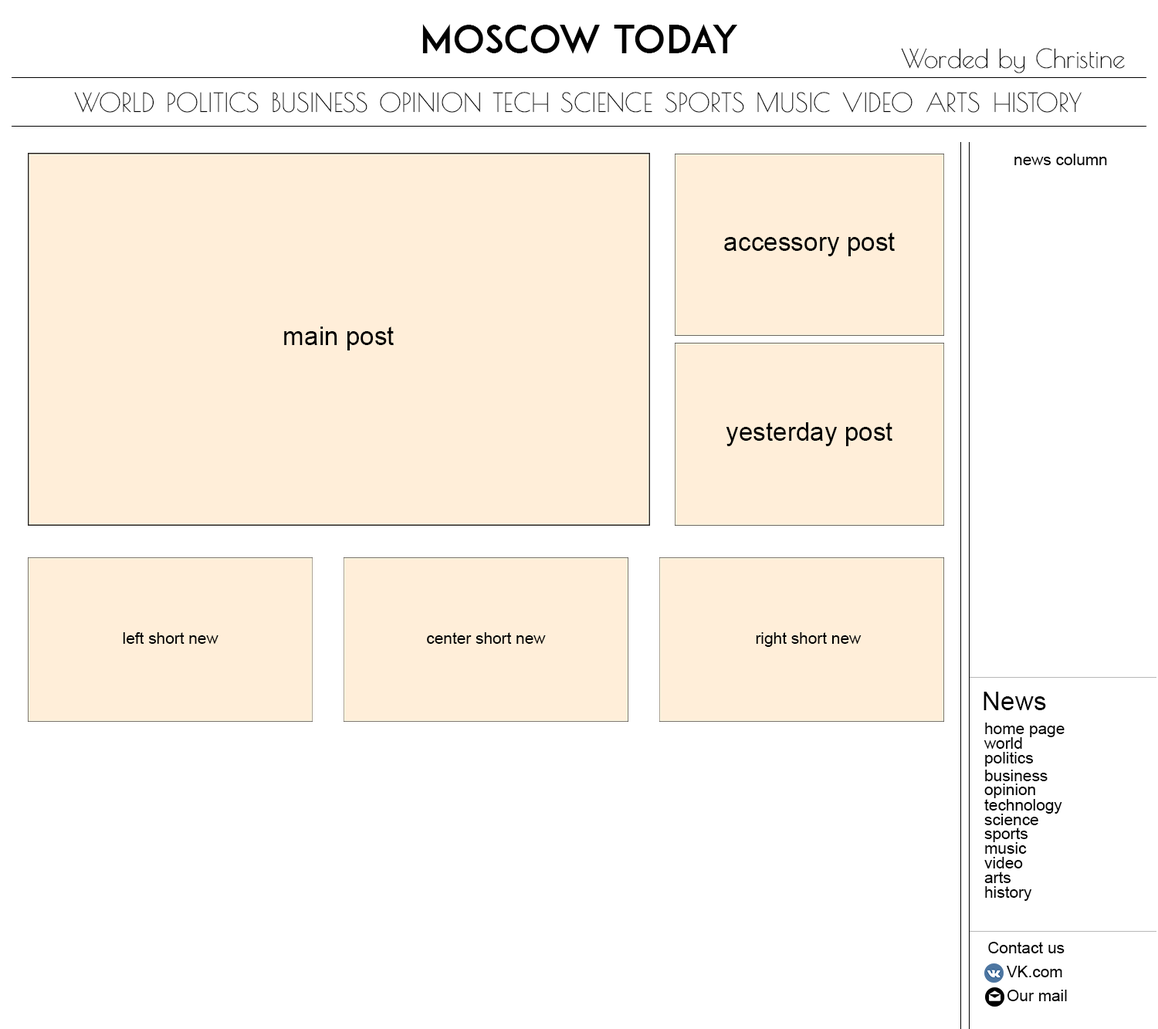
<style>
.page{position:relative;width:1158px;height:1029px;background:#ffffff}
.page>*{position:absolute;margin:0}
.t1{font:9.3px "ADAM.CGPRO";color:#000000;text-transform:uppercase}
.t2{font:25.7px "PoiretOne-Regular";color:#000000}
.t3{font:25.8px "PoiretOne-Regular";color:#000000;text-transform:uppercase}
.t4{font:16.1px "ArialMT";color:#000000}
.t5{font:25.7px "ArialMT";color:#000000}
</style>
<div class="page">
<p class="t1" style="left:422px;top:24px;width:315px;height:30px">Moscow today</p>
<p class="t2" style="left:901px;top:48px;width:224px;height:25px">Worded by Christine</p>
<p class="t3" style="left:74px;top:92px;width:80px;height:21px">world</p>
<p class="t3" style="left:168px;top:92px;width:91px;height:21px">politics</p>
<p class="t3" style="left:273px;top:92px;width:95px;height:21px">business</p>
<p class="t3" style="left:380px;top:92px;width:100px;height:21px">oPINION</p>
<p class="t3" style="left:493px;top:92px;width:55px;height:21px">TECH</p>
<p class="t3" style="left:561px;top:92px;width:92px;height:21px">SCIENCE</p>
<p class="t3" style="left:666px;top:92px;width:78px;height:21px">SPORTS</p>
<p class="t3" style="left:758px;top:92px;width:72px;height:21px">MUSIC</p>
<p class="t3" style="left:843px;top:92px;width:70px;height:21px">vIDEO</p>
<p class="t3" style="left:927px;top:92px;width:53px;height:21px">ARTS</p>
<p class="t3" style="left:995px;top:92px;width:87px;height:21px">HISTORY</p>
<p class="t4" style="left:1015px;top:154px;width:92px;height:11px">news column</p>
<p class="t5" style="left:724px;top:232px;width:171px;height:24px">accessory post</p>
<p class="t5" style="left:284px;top:327px;width:110px;height:24px">main post</p>
<p class="t5" style="left:726px;top:422px;width:167px;height:24px">yesterday post</p>
<p class="t4" style="left:123px;top:632px;width:96px;height:12px">left short new</p>
<p class="t4" style="left:427px;top:632px;width:119px;height:12px">center short new</p>
<p class="t4" style="left:756px;top:632px;width:106px;height:15px">right short new</p>
<p class="t5" style="left:984px;top:692px;width:62px;height:18px">News</p>
<p class="t4" style="left:985px;top:723px;width:80px;height:14px">home page</p>
<p class="t4" style="left:984px;top:737px;width:38px;height:12px">world</p>
<p class="t4" style="left:985px;top:752px;width:49px;height:15px">politics</p>
<p class="t4" style="left:985px;top:770px;width:63px;height:12px">business</p>
<p class="t4" style="left:985px;top:784px;width:51px;height:15px">opinion</p>
<p class="t4" style="left:985px;top:799px;width:78px;height:15px">technology</p>
<p class="t4" style="left:985px;top:814px;width:54px;height:12px">science</p>
<p class="t4" style="left:985px;top:828px;width:44px;height:15px">sports</p>
<p class="t4" style="left:985px;top:843px;width:42px;height:11px">music</p>
<p class="t4" style="left:985px;top:857px;width:38px;height:12px">video</p>
<p class="t4" style="left:985px;top:872px;width:27px;height:11px">arts</p>
<p class="t4" style="left:985px;top:887px;width:47px;height:14px">history</p>
<p class="t4" style="left:988px;top:942px;width:77px;height:12px">Contact us</p>
<p class="t4" style="left:1007px;top:966px;width:56px;height:12px">VK.com</p>
<p class="t4" style="left:1008px;top:990px;width:59px;height:12px">Our mail</p>
</div>
